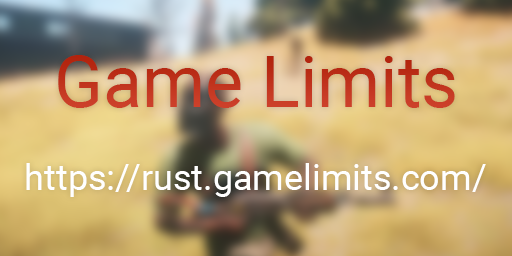
<style>
.page{position:relative;width:512px;height:256px}
.page>*{position:absolute;margin:0}
.t1{font:72px "Roboto-Regular";color:#c1341e}
.t2{font:36px "Roboto-Regular";color:#ffffff}
</style>
<div class="page">
<p class="t1" style="left:58px;top:55px;width:397px;height:53px">Game Limits</p>
<p class="t2" style="left:26px;top:163px;width:460px;height:34px">https://rust.gamelimits.com/</p>
</div>
